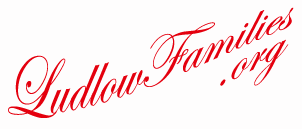
<style>
.page{position:relative;width:302px;height:129px;background:#fefdfd}
.page>*{position:absolute;margin:0}
.t1{font:60px/30px "EdwardianScriptITC";color:#e4000e}
</style>
<div class="page">
<p class="t1" style="left:8px;top:7px;width:286px;height:111px">LudlowFamilies<br>                    .org</p>
</div>
